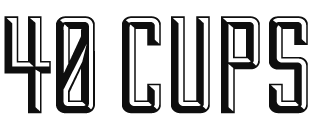
<style>
.page{position:relative;width:314px;height:130px;background:#ffffff}
.page>*{position:absolute;margin:0}
.t1{font:137.9px "Duke-Regular";color:#0e0e0e;scale:1.1 1}
</style>
<div class="page">
<p class="t1" style="left:4px;top:16px;width:304px;height:98px">40 CUPS</p>
</div>
